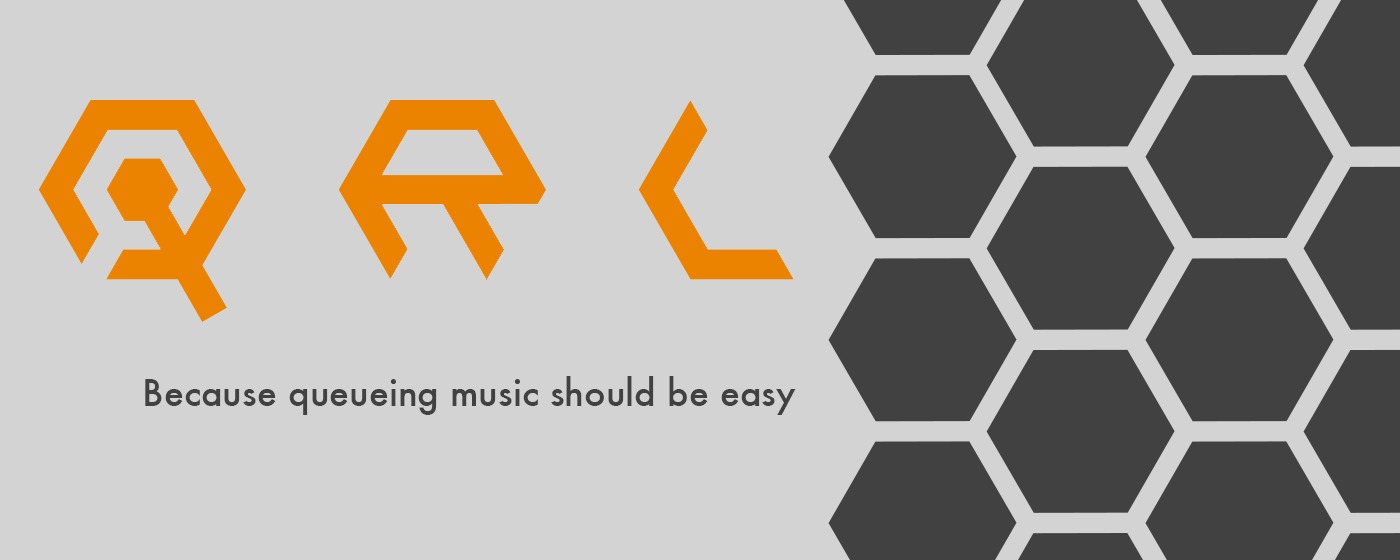
<style>
.page{position:relative;width:1400px;height:560px;background:#d3d3d3}
.page>*{position:absolute;margin:0}
.t1{font:36px "Futura-Medium";color:#414141}
</style>
<div class="page">
<p class="t1" style="left:145px;top:376px;width:651px;height:39px">Because queueing music should be easy</p>
</div>
